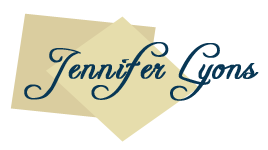
<style>
.page{position:relative;width:268px;height:150px;background:#ffffff}
.page>*{position:absolute;margin:0}
.t1{font:40.6px "FreebooterScript";letter-spacing:0.025em;color:#083755;font-weight:bold}
</style>
<div class="page">
<p class="t1" style="left:24px;top:42px;width:235px;height:59px">Jennifer Lyons</p>
</div>
